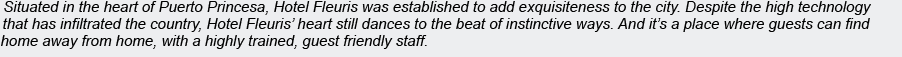
<style>
.page{position:relative;width:902px;height:57px;background:#edeef0}
.page>*{position:absolute;margin:0}
.t1{font:15px "Arial-ItalicMT";color:#000000}
</style>
<div class="page">
<p class="t1" style="left:4px;top:1px;width:867px;height:14px">Situated in the heart of Puerto Princesa, Hotel Fleuris was established to add exquisiteness to the city. Despite the high technology</p>
<p class="t1" style="left:3px;top:18px;width:867px;height:14px">that has infiltrated the country, Hotel Fleuris’ heart still dances to the beat of instinctive ways. And it’s a place where guests can find</p>
<p class="t1" style="left:1px;top:35px;width:426px;height:14px">a home away from home, with a highly trained, guest friendly staff.</p>
</div>
